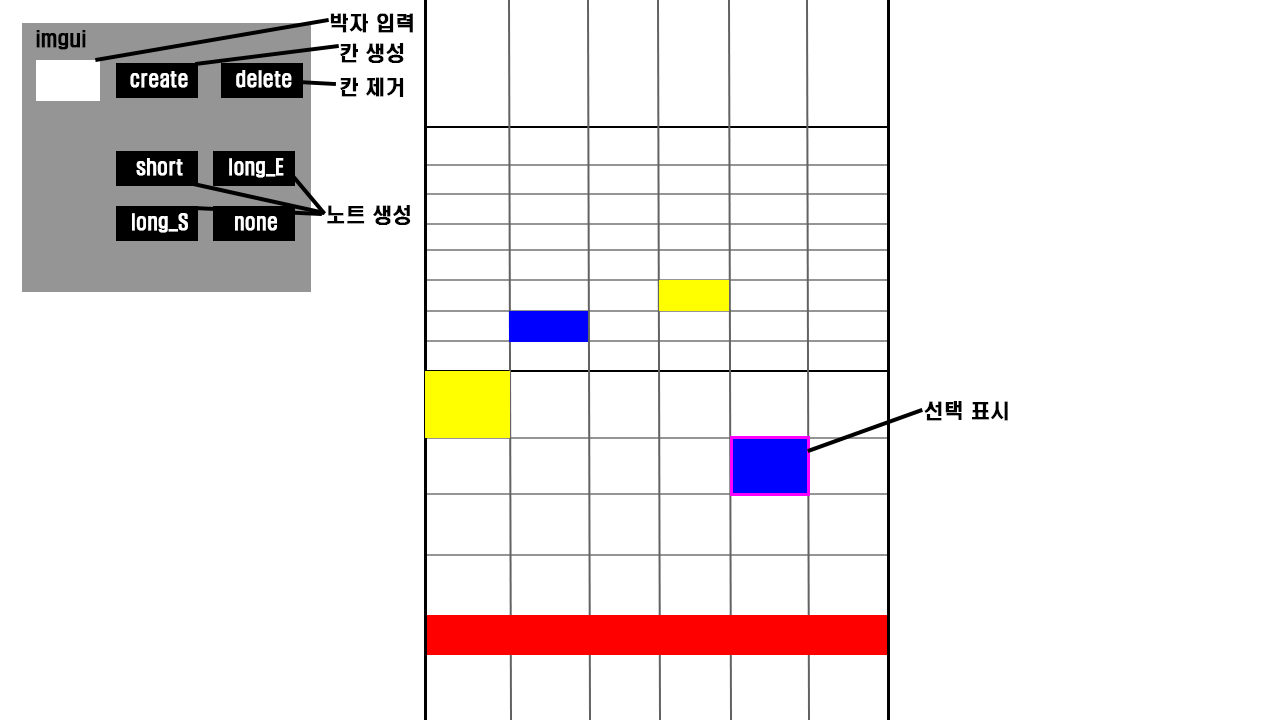
<style>
.page{position:relative;width:1280px;height:720px;background:#ffffff}
.page>*{position:absolute;margin:0}
.t1{font:20px "H2hdkM";color:#000000;font-weight:bold;scale:0.97 1}
.t2{font:20px "H2hdkM";color:#ffffff;font-weight:bold;scale:0.88 1}
</style>
<div class="page">
<p class="t1" style="left:330px;top:13px;width:83px;height:20px">박자 입력</p>
<p class="t1" style="left:36px;top:30px;width:50px;height:20px">imgui</p>
<p class="t1" style="left:340px;top:43px;width:64px;height:20px">칸 생성</p>
<p class="t2" style="left:130px;top:71px;width:58px;height:17px">create</p>
<p class="t2" style="left:236px;top:70px;width:56px;height:18px">delete</p>
<p class="t1" style="left:340px;top:77px;width:64px;height:20px">칸 제거</p>
<p class="t2" style="left:136px;top:158px;width:47px;height:18px">short</p>
<p class="t2" style="left:229px;top:158px;width:55px;height:20px">long_E</p>
<p class="t1" style="left:327px;top:205px;width:84px;height:20px">노트 생성</p>
<p class="t2" style="left:132px;top:213px;width:56px;height:20px">long_S</p>
<p class="t2" style="left:235px;top:216px;width:42px;height:15px">none</p>
<p class="t1" style="left:924px;top:401px;width:84px;height:20px">선택 표시</p>
</div>
